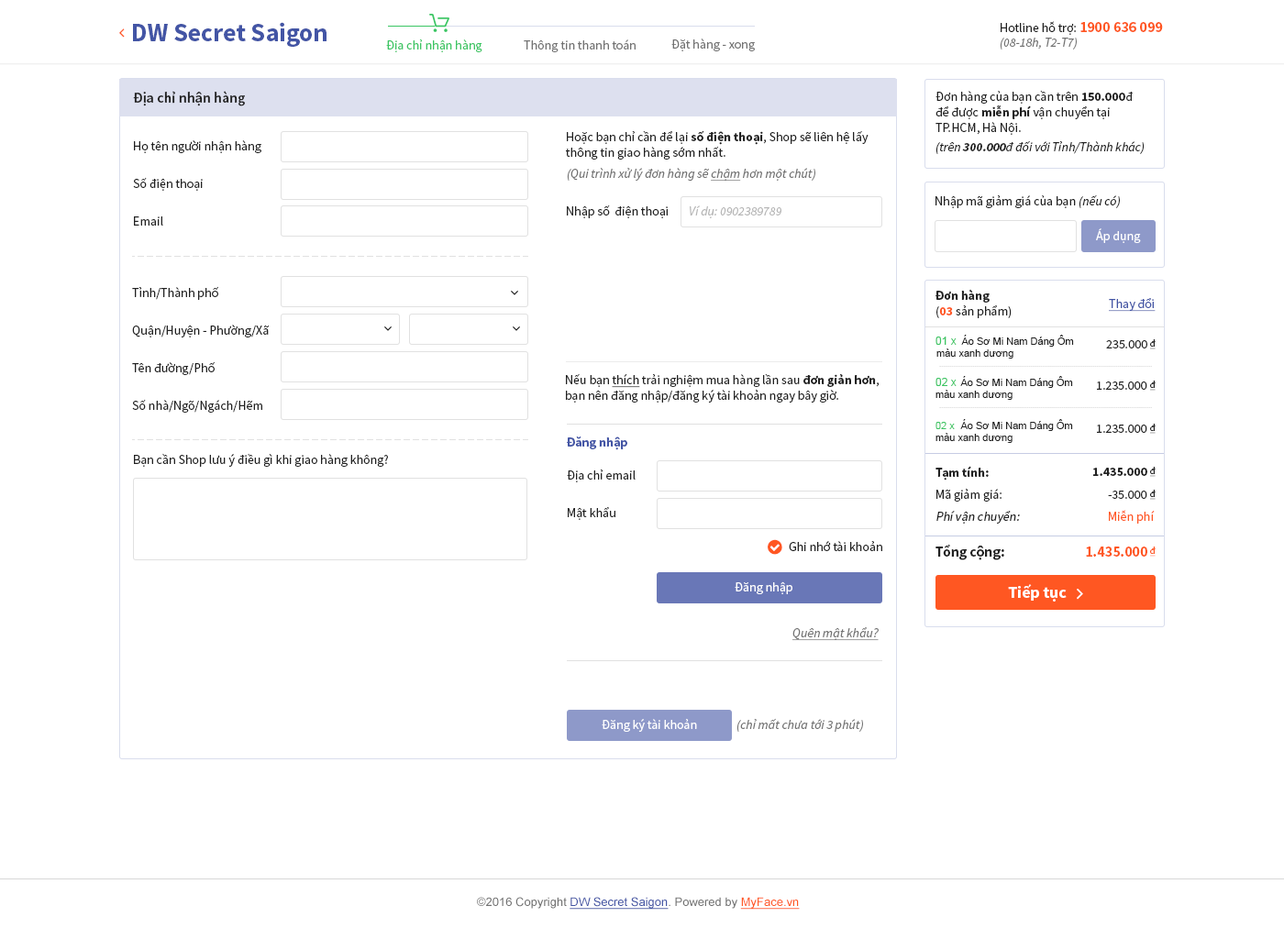
<style>
.page{position:relative;width:1284px;height:928px;background:#ffffff}
.page>*{position:absolute;margin:0}
.t1{font:25.7px "SourceSansPro-Bold";color:#4355a5}
.t2{font:12.8px "SourceSansPro-Regular";color:#212121}
.t3{font:14.7px "SourceSansPro-Bold";color:#ff5722}
.t4{font:12.8px "SourceSansPro-Regular";color:#3ac562}
.t5{font:12.8px "SourceSansPro-Regular";color:#727272}
.t6{font:12.8px "SourceSansPro-It";color:#727272}
.t7{font:12.8px "SourceSansPro-Bold";color:#212121}
.t8{font:14.7px "SourceSansPro-Semibold";color:#212121}
.t9{font:12.8px/37.6px "SourceSansPro-Regular";color:#212121}
.t10{font:12.8px "SourceSansPro-It";color:#212121}
.t11{font:12.8px "SourceSansPro-BoldIt";color:#212121}
.t12{font:12.8px "SourceSansPro-It";color:#727272;text-decoration:underline}
.t13{font:12.8px "SourceSansPro-It";color:#b6b6b6}
.t14{font:12.8px "SourceSansPro-Regular";color:#ffffff}
.t15{font:12.8px "SourceSansPro-Bold";color:#ff5722}
.t16{font:12.8px "SourceSansPro-Regular";color:#4355a5;text-decoration:underline}
.t17{font:11px "ArialMT";color:#3ac562}
.t18{font:10.1px "ArialMT";color:#212121}
.t19{font:9.2px "SourceSansPro-Regular";color:#212121;text-decoration:underline}
.t20{font:12.8px "SourceSansPro-Regular";color:#212121;text-decoration:underline}
.t21{font:10.1px "ArialMT";color:#3ac562}
.t22{font:12.8px "SourceSansPro-Bold";color:#4355a5}
.t23{font:12.8px/22px "SourceSansPro-Regular";color:#212121;font-style:italic}
.t24{font:12.8px/22px "SourceSansPro-Bold";color:#212121}
.t25{font:12.8px/22px "SourceSansPro-Regular";color:#212121}
.t26{font:12.8px "SourceSansPro-Regular";color:#ff5722}
.t27{font:14.7px "SourceSansPro-Bold";color:#212121}
.t28{font:9.2px "SourceSansPro-Regular";color:#ff5722;text-decoration:underline}
.t29{font:16.5px "SourceSansPro-Bold";color:#ffffff}
.t30{font:11.9px "ArialMT";color:#4355a5;text-decoration:underline}
.t31{font:11.9px "ArialMT";color:#727272}
.t32{font:11.9px "ArialMT";color:#ff5722;text-decoration:underline}
</style>
<div class="page">
<p class="t1" style="left:133px;top:22px;width:194px;height:25px">DW Secret Saigon</p>
<p class="t2" style="left:1001px;top:21px;width:162px;height:14px">Hotline hỗ trợ: <span class="t3">1900 636 099</span></p>
<p class="t4" style="left:386px;top:39px;width:97px;height:13px">Địa chỉ nhận hàng</p>
<p class="t5" style="left:524px;top:39px;width:112px;height:13px">Thông tin thanh toán</p>
<p class="t5" style="left:672px;top:39px;width:83px;height:12px">Đặt hàng - xong</p>
<p class="t6" style="left:1000px;top:38px;width:77px;height:12px">(08-18h, T2-T7)</p>
<p class="t2" style="left:936px;top:90px;width:197px;height:45px">Đơn hàng của bạn cần trên <span class="t7">150.000</span>đ để được <span class="t7">miễn phí</span> vận chuyển tại TP.HCM, Hà Nội.</p>
<p class="t8" style="left:133px;top:91px;width:112px;height:15px">Địa chỉ nhận hàng</p>
<p class="t2" style="left:566px;top:130px;width:303px;height:30px">Hoặc bạn chỉ cần để lại <span class="t7">số điện thoại</span>, Shop sẽ liên hệ lấy<br>thông tin giao hàng sớm nhất.</p>
<p class="t9" style="left:133px;top:140px;width:128px;height:86px">Họ tên người nhận hàng<br>Số điện thoại <br>Email</p>
<p class="t10" style="left:936px;top:140px;width:209px;height:14px">(trên <span class="t11">300.000</span>đ đối với Tỉnh/Thành khác)</p>
<p class="t6" style="left:567px;top:168px;width:249px;height:14px">(Qui trình xử lý đơn hàng sẽ <span class="t12">chậm</span> hơn một chút)</p>
<p class="t2" style="left:936px;top:194px;width:184px;height:14px">Nhập mã giảm giá của bạn <span class="t10">(nếu có)</span></p>
<p class="t2" style="left:567px;top:205px;width:101px;height:13px">Nhập số  điện thoại</p>
<p class="t13" style="left:690px;top:205px;width:92px;height:13px">Ví dụ: 0902389789</p>
<p class="t14" style="left:1096px;top:228px;width:45px;height:15px">Áp dụng</p>
<p class="t9" style="left:132px;top:286px;width:137px;height:127px">Tỉnh/Thành phố<br>Quận/Huyện - Phường/Xã<br>Tên đường/Phố<br>Số nhà/Ngõ/Ngách/Hẽm</p>
<p class="t2" style="left:936px;top:289px;width:76px;height:29px"><span class="t7">Đơn hàng<br></span>(<span class="t15">03 </span>sản phẩm)</p>
<p class="t16" style="left:1109px;top:298px;width:47px;height:14px">Thay đổi</p>
<p class="t17" style="left:936px;top:337px;width:21px;height:8px">01 x</p>
<p class="t18" style="left:937px;top:335px;width:137px;height:24px">Áo Sơ Mi Nam Dáng Ôm màu xanh dương</p>
<p class="t2" style="left:1106px;top:340px;width:42px;height:9px">235.000</p>
<p class="t19" style="left:1150px;top:339px;width:6px;height:11px">đ</p>
<p class="t2" style="left:566px;top:373px;width:314px;height:30px">Nếu bạn <span class="t20">thích</span> trải nghiệm mua hàng lần sau <span class="t7">đơn giản hơn</span>, bạn nên đăng nhập/đăng ký tài khoản ngay bây giờ.</p>
<p class="t18" style="left:936px;top:376px;width:137px;height:24px">Áo Sơ Mi Nam Dáng Ôm màu xanh dương</p>
<p class="t17" style="left:936px;top:378px;width:21px;height:8px">02 x</p>
<p class="t2" style="left:1097px;top:382px;width:51px;height:8px">1.235.000</p>
<p class="t19" style="left:1150px;top:381px;width:6px;height:10px">đ</p>
<p class="t18" style="left:936px;top:419px;width:137px;height:24px">Áo Sơ Mi Nam Dáng Ôm màu xanh dương</p>
<p class="t21" style="left:936px;top:422px;width:19px;height:7px">02 x</p>
<p class="t2" style="left:1097px;top:425px;width:51px;height:8px">1.235.000</p>
<p class="t19" style="left:1150px;top:424px;width:6px;height:10px">đ</p>
<p class="t22" style="left:567px;top:437px;width:61px;height:13px">Đăng nhập</p>
<p class="t2" style="left:134px;top:453px;width:254px;height:14px">Bạn cần Shop lưu ý điều gì khi giao hàng không?</p>
<p class="t9" style="left:567px;top:470px;width:69px;height:50px">Địa chỉ email<br>Mật khẩu</p>
<p class="t23" style="left:936px;top:466px;width:84px;height:58px"><span class="t24">Tạm tính:<br></span><span class="t25">Mã giảm giá:<br></span>Phí vận chuyển:</p>
<p class="t7" style="left:1093px;top:468px;width:55px;height:8px">1.435.000</p>
<p class="t19" style="left:1150px;top:467px;width:6px;height:10px">đ</p>
<p class="t2" style="left:1108px;top:491px;width:40px;height:8px">-35.000</p>
<p class="t19" style="left:1150px;top:490px;width:6px;height:10px">đ</p>
<p class="t26" style="left:1109px;top:510px;width:46px;height:14px">Miễn phí</p>
<p class="t2" style="left:789px;top:541px;width:94px;height:10px">Ghi nhớ tài khoản</p>
<p class="t27" style="left:936px;top:545px;width:69px;height:16px">Tổng cộng:</p>
<p class="t3" style="left:1086px;top:547px;width:62px;height:10px">1.435.000</p>
<p class="t28" style="left:1150px;top:547px;width:6px;height:10px">đ</p>
<p class="t14" style="left:735px;top:582px;width:58px;height:12px">Đăng nhập</p>
<p class="t29" style="left:1008px;top:584px;width:59px;height:18px">Tiếp tục</p>
<p class="t12" style="left:793px;top:628px;width:86px;height:13px">Quên mật khẩu?</p>
<p class="t14" style="left:602px;top:719px;width:95px;height:13px">Đăng ký tài khoản</p>
<p class="t6" style="left:737px;top:718px;width:126px;height:14px">(chỉ mất chưa tới 3 phút)</p>
<p class="t30" style="left:477px;top:897px;width:323px;height:13px"><span class="t31">©2016 Copyright </span>DW Secret Saigon<span class="t31">. Powered by </span><span class="t32">MyFace.vn</span></p>
</div>
